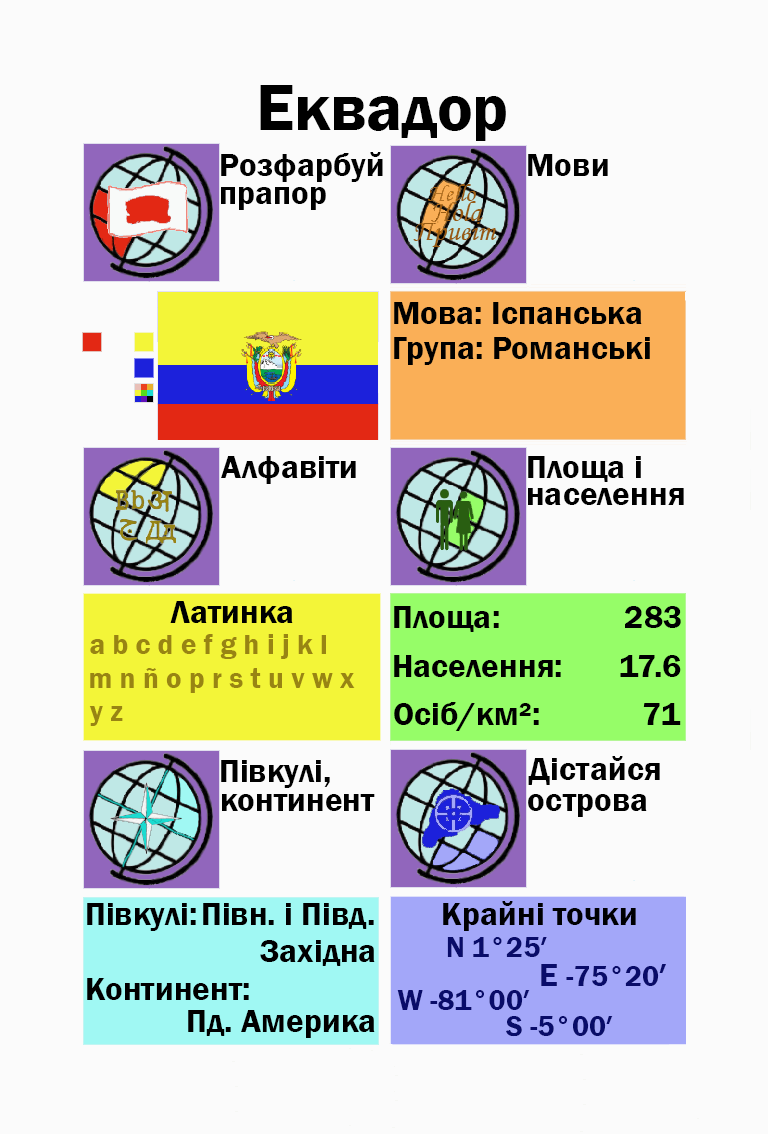
<style>
.page{position:relative;width:768px;height:1134px;background:#fbfbfb}
.page>*{position:absolute;margin:0}
.t1{font:66.7px "FranklinGothic-Demi";color:#000000}
.t2{font:33.3px "FranklinGothic-Demi";color:#000000}
.t3{font:33.3px "FranklinGothic-Demi";color:#000003}
.t4{font:29.2px "FranklinGothic-Demi";color:#988413}
.t5{font:29.2px "FranklinGothic-Demi";color:#090c69}
.t6{font:33.3px "FranklinGothic-Demi";color:#090c69}
</style>
<div class="page">
<p class="t1" style="left:260px;top:85px;width:246px;height:56px">Еквадор</p>
<p class="t2" style="left:221px;top:152px;width:162px;height:30px">Розфарбуй</p>
<p class="t2" style="left:528px;top:154px;width:80px;height:22px">Мови</p>
<p class="t2" style="left:221px;top:187px;width:105px;height:23px">прапор</p>
<p class="t2" style="left:394px;top:302px;width:248px;height:22px">Мова: Іспанська</p>
<p class="t2" style="left:394px;top:337px;width:256px;height:28px">Група: Романські</p>
<p class="t2" style="left:221px;top:456px;width:135px;height:28px">Алфавіти</p>
<p class="t2" style="left:528px;top:456px;width:113px;height:26px">Площа і</p>
<p class="t2" style="left:528px;top:488px;width:156px;height:17px">населення</p>
<p class="t2" style="left:170px;top:601px;width:123px;height:22px">Латинка</p>
<p class="t2" style="left:394px;top:606px;width:105px;height:26px">Площа:</p>
<p class="t3" style="left:625px;top:606px;width:56px;height:22px">283</p>
<p class="t4" style="left:90px;top:634px;width:236px;height:25px">a b c d e f g h i j k l</p>
<p class="t2" style="left:394px;top:655px;width:167px;height:22px">Населення:</p>
<p class="t2" style="left:620px;top:655px;width:61px;height:22px">17.6</p>
<p class="t4" style="left:90px;top:668px;width:265px;height:25px">m n ñ o p r s t u v w x</p>
<p class="t2" style="left:394px;top:702px;width:145px;height:29px">Осіб/км²:</p>
<p class="t4" style="left:89px;top:706px;width:34px;height:20px">y z</p>
<p class="t2" style="left:643px;top:703px;width:38px;height:22px">71</p>
<p class="t2" style="left:221px;top:760px;width:109px;height:28px">Півкулі,</p>
<p class="t2" style="left:528px;top:756px;width:132px;height:29px">Дістайся</p>
<p class="t2" style="left:222px;top:794px;width:153px;height:17px">континент</p>
<p class="t2" style="left:528px;top:794px;width:119px;height:23px">острова</p>
<p class="t2" style="left:87px;top:903px;width:109px;height:28px">Півкулі:</p>
<p class="t2" style="left:203px;top:903px;width:171px;height:26px">Півн. і Півд.</p>
<p class="t3" style="left:443px;top:901px;width:193px;height:30px">Крайні точки</p>
<p class="t2" style="left:260px;top:940px;width:115px;height:26px">Західна</p>
<p class="t5" style="left:447px;top:937px;width:100px;height:20px">N 1°25′</p>
<p class="t5" style="left:541px;top:964px;width:125px;height:22px"><span class="t6">E </span>-75°20<span class="t6">′</span></p>
<p class="t2" style="left:87px;top:978px;width:162px;height:22px">Континент:</p>
<p class="t5" style="left:397px;top:990px;width:133px;height:20px">W -81°00′</p>
<p class="t2" style="left:188px;top:1010px;width:187px;height:28px">Пд. Америка</p>
<p class="t5" style="left:506px;top:1016px;width:107px;height:21px">S -5°00′</p>
</div>
